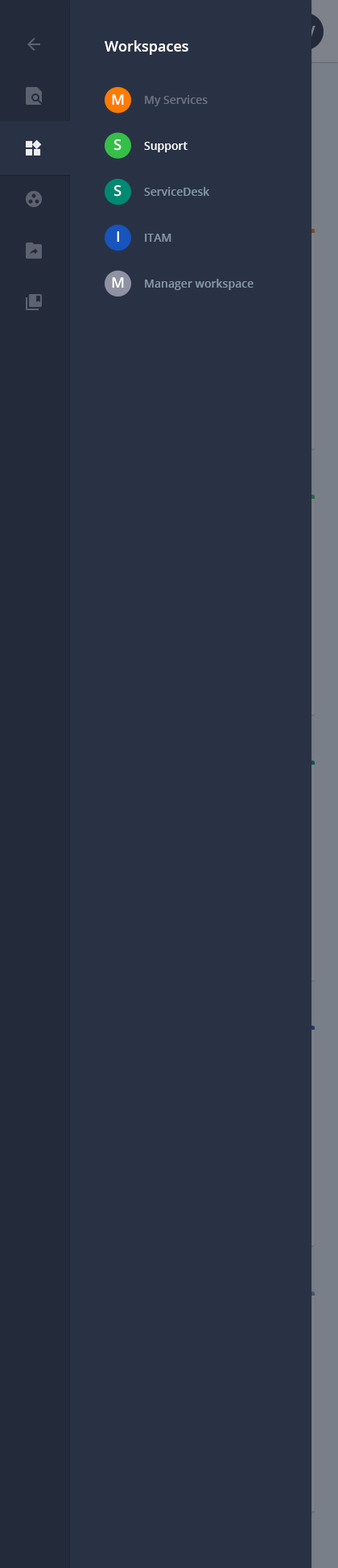
<style>
.page{position:relative;width:338px;height:1568px;background:#293244}
.page>*{position:absolute;margin:0}
.t1{font:14.5px "OpenSans-Bold";color:#293244;text-transform:uppercase}
.t2{font:14.5px "OpenSans-Semibold";color:#ffffff}
.t3{font:14.5px "OpenSans-Semibold";letter-spacing:0.01em;color:#ffffff}
.t4{font:11.3px "OpenSans-Semibold";color:#6d7484}
.t5{font:11.3px "OpenSans-Semibold";color:#ffffff}
.t6{font:11.3px "OpenSans-Semibold";color:#8898aa}
</style>
<div class="page">
<p class="t1" style="left:296px;top:26px;width:20px;height:10px">AV</p>
<p class="t2" style="left:105px;top:40px;width:84px;height:15px">Workspaces</p>
<p class="t3" style="left:112px;top:94px;width:12px;height:11px">M</p>
<p class="t4" style="left:145px;top:95px;width:63px;height:11px">My Services</p>
<p class="t3" style="left:114px;top:139px;width:8px;height:12px">S</p>
<p class="t5" style="left:144px;top:142px;width:44px;height:10px">Support</p>
<p class="t3" style="left:114px;top:185px;width:8px;height:12px">S</p>
<p class="t6" style="left:144px;top:187px;width:66px;height:9px">ServiceDesk</p>
<p class="t3" style="left:117px;top:231px;width:2px;height:11px">I</p>
<p class="t6" style="left:145px;top:234px;width:27px;height:8px">ITAM</p>
<p class="t3" style="left:112px;top:277px;width:12px;height:11px">M</p>
<p class="t6" style="left:145px;top:279px;width:109px;height:11px">Manager workspace</p>
</div>
